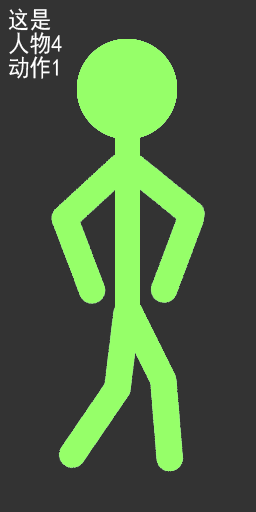
<style>
.page{position:relative;width:256px;height:512px;background:#333333}
.page>*{position:absolute;margin:0}
.t1{font:24px "SimHei";color:#ffffff;scale:0.9 1}
</style>
<div class="page">
<p class="t1" style="left:8px;top:8px;width:43px;height:23px">这是</p>
<p class="t1" style="left:9px;top:32px;width:53px;height:23px">人物4</p>
<p class="t1" style="left:8px;top:56px;width:50px;height:23px">动作1</p>
</div>
